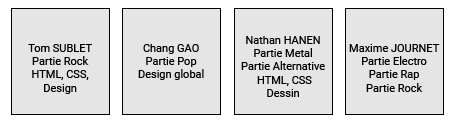
<style>
.page{position:relative;width:456px;height:124px;background:#e5e5e5}
.page>*{position:absolute;margin:0}
.t1{font:11px "Roboto-Regular";color:#000000}
</style>
<div class="page">
<p class="t1" style="left:241px;top:36px;width:84px;height:61px;text-align:center">Nathan HANEN<br>Partie Metal<br>Partie Alternative<br> HTML, CSS<br>Dessin</p>
<p class="t1" style="left:28px;top:44px;width:64px;height:50px;text-align:center">Tom SUBLET<br>Partie Rock<br>HTML, CSS,<br>Design</p>
<p class="t1" style="left:138px;top:44px;width:66px;height:36px;text-align:center">Chang GAO<br>Partie Pop<br>Design global</p>
<p class="t1" style="left:349px;top:44px;width:91px;height:48px;text-align:center">Maxime JOURNET<br>Partie Electro<br>Partie Rap<br>Partie Rock</p>
</div>
